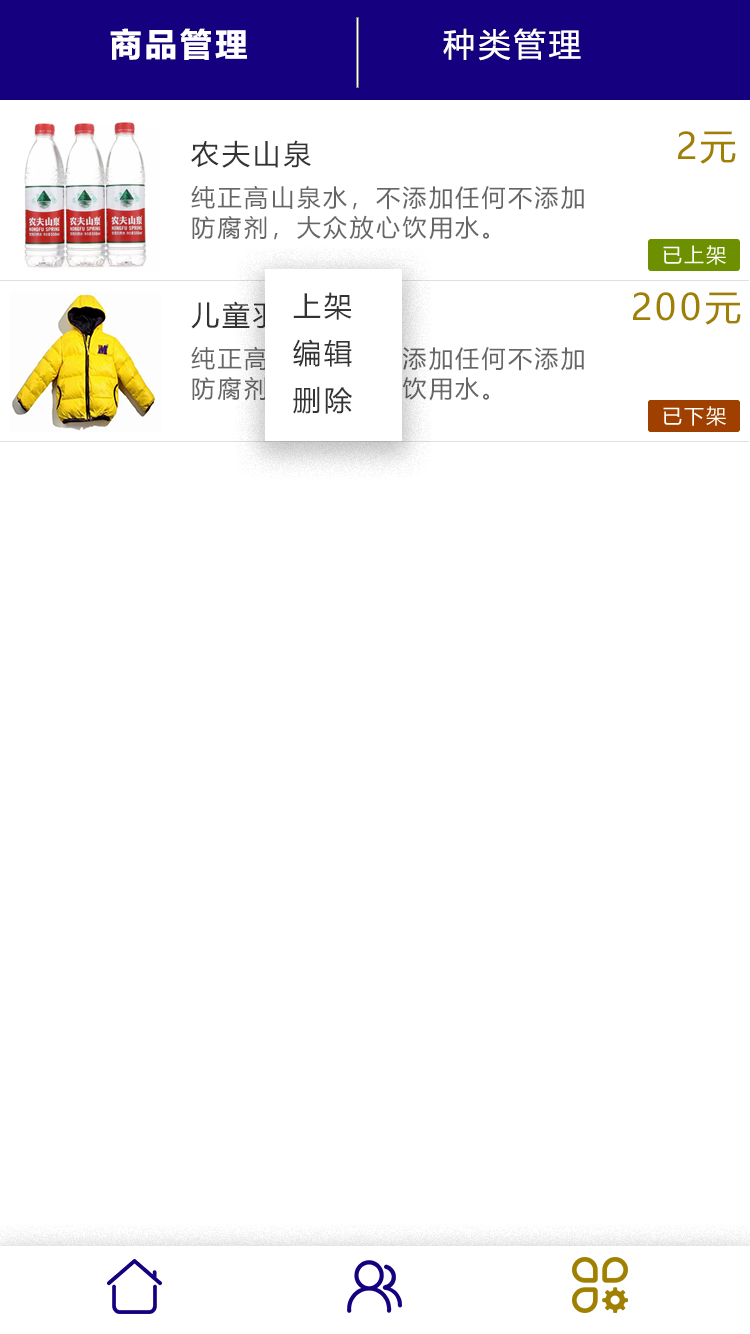
<style>
.page{position:relative;width:750px;height:1334px;background:#ffffff}
.page>*{position:absolute;margin:0}
.t1{font:32px "MicrosoftYaHei";letter-spacing:0.1em;color:#ffffff}
.t2{font:36px "MicrosoftYaHei";letter-spacing:0.1em;color:#a08000}
.t3{font:28px "MicrosoftYaHei";letter-spacing:0.1em;color:#333333}
.t4{font:24px/30px "MicrosoftYaHei";letter-spacing:0.1em;color:#666666}
.t5{font:28px "MicrosoftYaHei";letter-spacing:0.1em}
</style>
<div class="page">
<p class="t1" style="left:443px;top:28px;width:138px;height:33px">种类管理</p>
<p class="t2" style="left:678px;top:131px;width:58px;height:33px">2元</p>
<p class="t3" style="left:191px;top:140px;width:120px;height:28px">农夫山泉</p>
<p class="t4" style="left:191px;top:185px;width:393px;height:55px">纯正高山泉水，不添加任何不添加<br>防腐剂，大众放心饮用水。</p>
<p class="t3" style="left:293px;top:292px;width:59px;height:28px">上架</p>
<p class="t2" style="left:633px;top:292px;width:108px;height:33px">200元</p>
<p class="t5" style="left:191px;top:301px;width:151px;height:28px">儿童羽绒服</p>
<p class="t3" style="left:293px;top:339px;width:59px;height:28px">编辑</p>
<p class="t4" style="left:191px;top:346px;width:393px;height:55px">纯正高山泉水，不添加任何不添加<br>防腐剂，大众放心饮用水。</p>
<p class="t3" style="left:293px;top:386px;width:59px;height:28px">删除</p>
</div>
